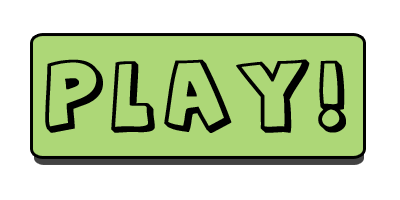
<style>
.page{position:relative;width:400px;height:200px;background:#ffffff}
.page>*{position:absolute;margin:0}
.t1{font:65px "AgentOrange";letter-spacing:0.125em;color:#000000;font-weight:bold}
</style>
<div class="page">
<p class="t1" style="left:45px;top:59px;width:301px;height:74px">Play!</p>
</div>
